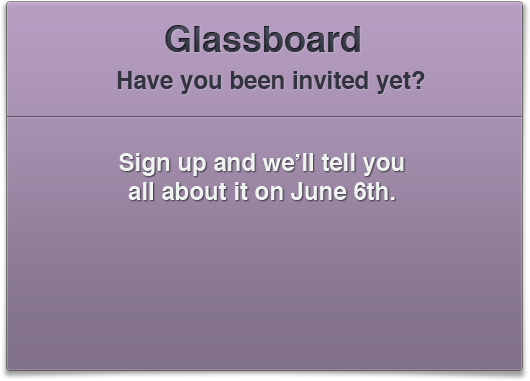
<style>
.page{position:relative;width:530px;height:381px}
.page>*{position:absolute;margin:0}
.t1{font:36px "Helvetica-Bold";color:#31343f}
.t2{font:24px "Helvetica-Bold";color:#31343f}
.t3{font:24px "Helvetica-Bold";color:#f8fff9}
</style>
<div class="page">
<p class="t1" style="left:165px;top:25px;width:195px;height:27px">Glassboard</p>
<p class="t2" style="left:117px;top:71px;width:308px;height:23px">Have you been invited yet?</p>
<p class="t3" style="left:119px;top:153px;width:285px;height:47px;text-align:center;opacity:0.9">Sign up and we’ll tell you<br>all about it on June 6th.</p>
</div>
